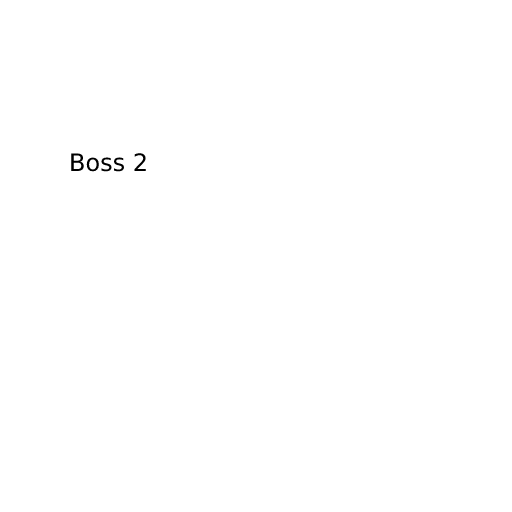
<style>
.page{position:relative;width:512px;height:512px;background:#ffffff}
.page>*{position:absolute;margin:0}
.t1{font:24px "DejaVuSans";color:#000000}
</style>
<div class="page">
<p class="t1" style="left:71px;top:153px;width:75px;height:19px">Boss 2</p>
</div>
